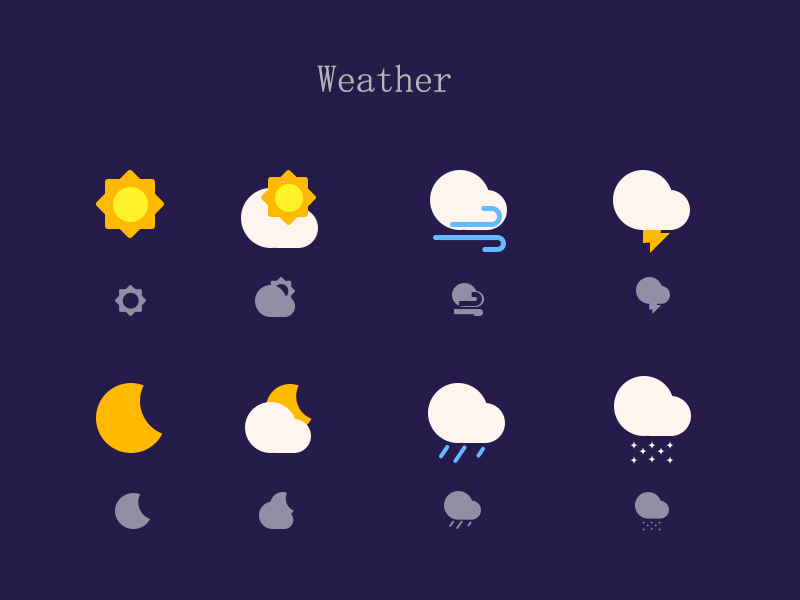
<style>
.page{position:relative;width:800px;height:600px;background:#261c4c}
.page>*{position:absolute;margin:0}
.t1{font:38.6px "SimSun";color:#b5b5b5}
</style>
<div class="page">
<p class="t1" style="left:317px;top:64px;width:134px;height:28px">Weather</p>
</div>
